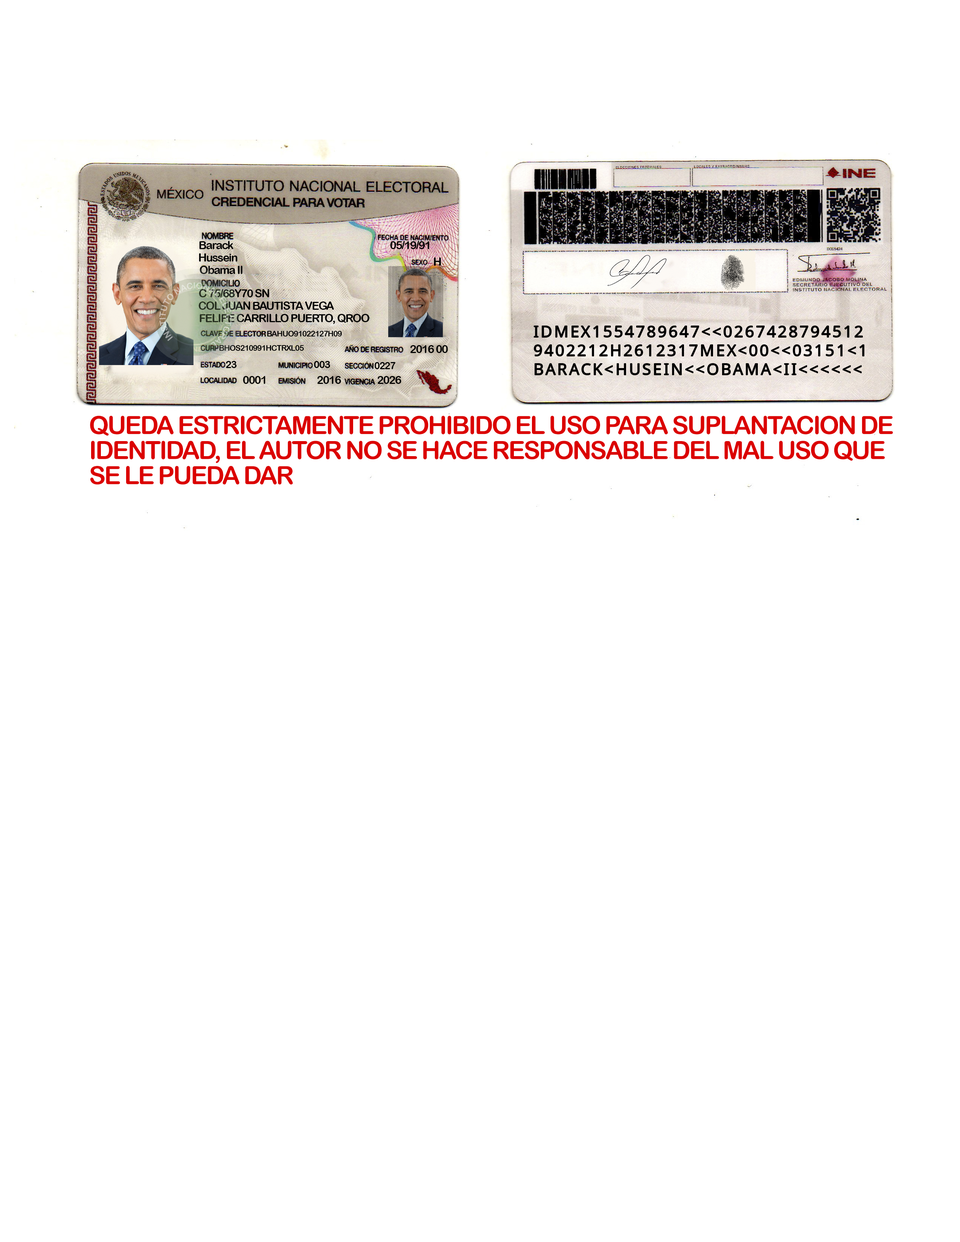
<style>
.page{position:relative;width:960px;height:1242px;background:#ffffff}
.page>*{position:absolute;margin:0}
.t1{font:11.1px "ArialRoundedMTBold";letter-spacing:-0.06em;color:#000000}
.t2{font:11.1px "ArialRoundedMTBold";letter-spacing:-0.06em}
.t3{font:15.7px/18.8px "NotoSans";letter-spacing:0.125em;color:#000000}
.t4{font:8px "ArialRoundedMTBold";letter-spacing:-0.06em;color:#000000}
.t5{font:10.1px "ArialRoundedMTBold";letter-spacing:-0.06em;color:#000000}
.t6{font:9.7px "ArialRoundedMTBold";letter-spacing:-0.06em;color:#000000}
.t7{font:25.1px/25.1px "ArialRoundedMTBold";letter-spacing:-0.06em;color:#db0100}
</style>
<div class="page">
<p class="t1" style="left:199px;top:241px;width:34px;height:8px">Barack</p>
<p class="t1" style="left:390px;top:241px;width:39px;height:8px">05/19/91</p>
<p class="t1" style="left:199px;top:253px;width:39px;height:9px">Hussein</p>
<p class="t1" style="left:434px;top:257px;width:7px;height:9px">H</p>
<p class="t1" style="left:200px;top:266px;width:42px;height:8px">Obama II</p>
<p class="t2" style="left:199px;top:289px;width:70px;height:8px">C 75/68Y70 SN</p>
<p class="t1" style="left:199px;top:302px;width:135px;height:8px">COL JUAN BAUTISTA VEGA</p>
<p class="t1" style="left:200px;top:314px;width:169px;height:10px">FELIPE CARRILLO PUERTO, QROO</p>
<p class="t3" style="left:534px;top:326px;width:330px;height:49px">IDMEX1554789647&lt;&lt;0267428794512<br>9402212H2612317MEX&lt;00&lt;&lt;03151&lt;1<br>BARACK&lt;HUSEIN&lt;&lt;OBAMA&lt;II&lt;&lt;&lt;&lt;&lt;&lt;</p>
<p class="t4" style="left:267px;top:331px;width:75px;height:6px">BAHUO91022127H09</p>
<p class="t4" style="left:219px;top:345px;width:85px;height:6px">BHOS210991HCTRXL05</p>
<p class="t1" style="left:410px;top:345px;width:38px;height:8px">2016 00</p>
<p class="t5" style="left:226px;top:361px;width:11px;height:7px">23</p>
<p class="t5" style="left:314px;top:361px;width:16px;height:7px">003</p>
<p class="t6" style="left:375px;top:362px;width:21px;height:7px">0227</p>
<p class="t1" style="left:243px;top:376px;width:22px;height:8px">0001</p>
<p class="t1" style="left:317px;top:376px;width:24px;height:8px">2016</p>
<p class="t1" style="left:378px;top:376px;width:23px;height:8px">2026</p>
<p class="t7" style="left:90px;top:416px;width:803px;height:69px">QUEDA ESTRICTAMENTE PROHIBIDO EL USO PARA SUPLANTACION DE<br>IDENTIDAD, EL AUTOR NO SE HACE RESPONSABLE DEL MAL USO QUE <br>SE LE PUEDA DAR</p>
</div>
